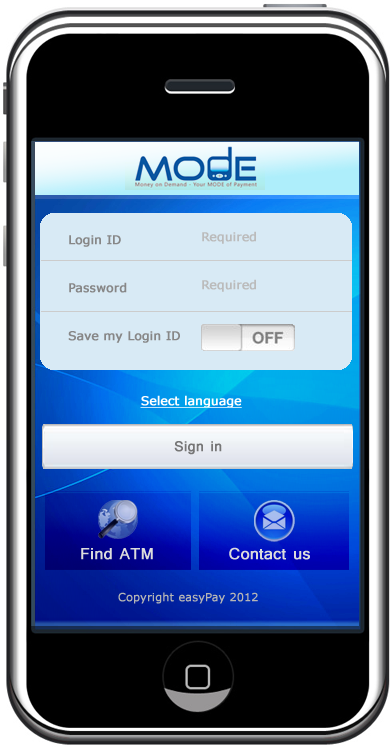
<style>
.page{position:relative;width:390px;height:747px;background:#000000}
.page>*{position:absolute;margin:0}
.t1{font:12px/48px "Verdana";color:#bbbbbb;font-weight:bold}
.t2{font:12px/48px "Verdana";color:#878787;font-weight:bold}
.t3{font:12px/65px "Verdana";color:#ffffff;font-weight:bold;text-decoration:underline}
.t4{font:18px "Tunga";color:#767676;font-weight:bold}
.t5{font:20px "Tunga";color:#dcdcdc;font-weight:bold}
.t6{font:11px "Verdana";color:#b5b5b5;font-weight:bold}
</style>
<div class="page">
<p class="t1" style="left:202px;top:231px;width:54px;height:61px">Required<br>Required</p>
<p class="t2" style="left:68px;top:235px;width:174px;height:173px">Login ID<br>Password<br>Save my Login ID<br>                <span class="t3">Select language</span></p>
<p class="t4" style="left:174px;top:441px;width:48px;height:14px">Sign in</p>
<p class="t5" style="left:81px;top:547px;width:229px;height:13px">Find ATM           Contact us</p>
<p class="t6" style="left:118px;top:592px;width:140px;height:12px">Copyright easyPay 2012</p>
</div>
